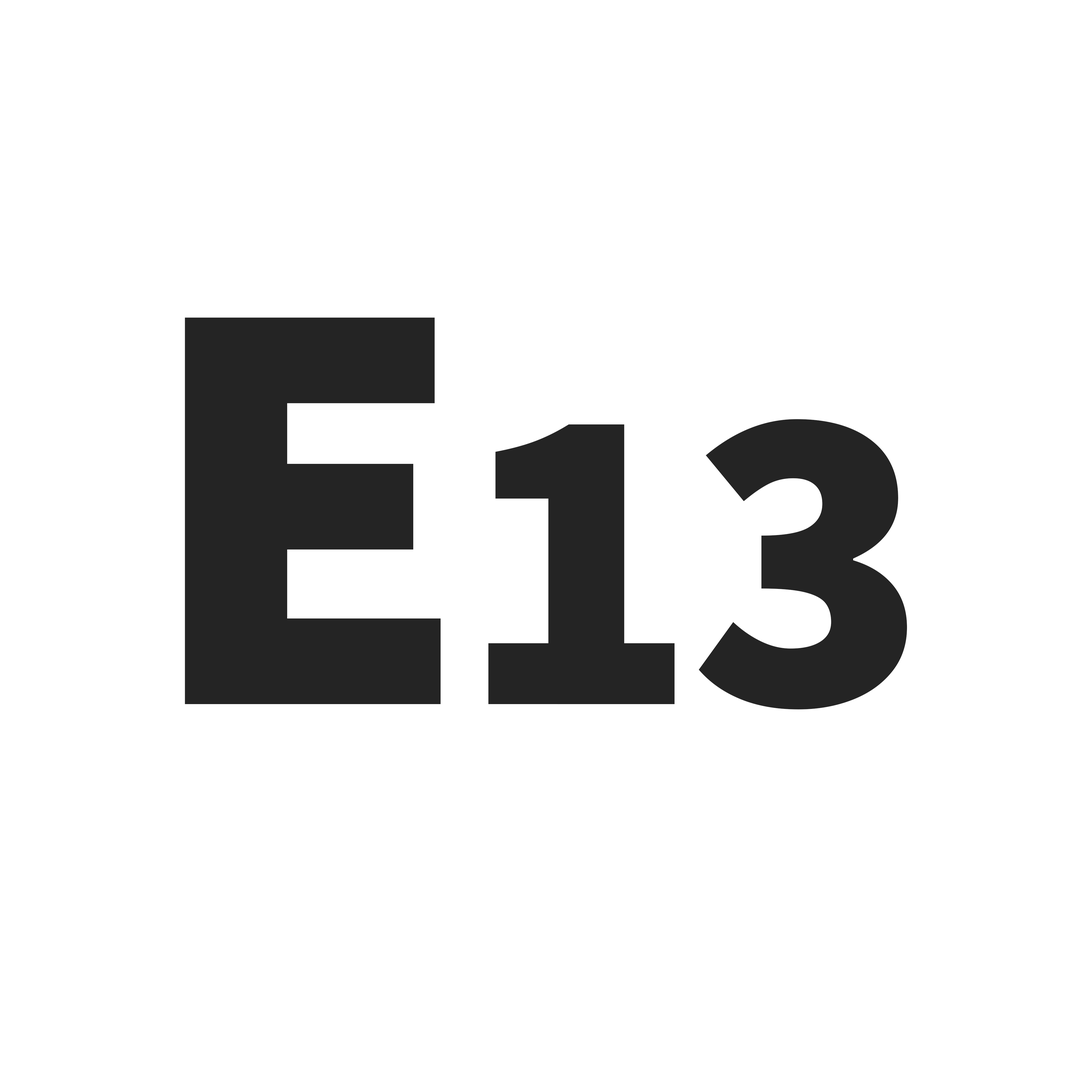
<style>
.page{position:relative;width:1092px;height:1092px;background:#ffffff}
.page>*{position:absolute;margin:0}
.t1{font:441.1px "Assistant-ExtraBold";color:#242424}
.t2{font:594.6px "Assistant-ExtraBold";color:#242424}
</style>
<div class="page">
<p class="t1" style="left:185px;top:318px;width:722px;height:391px"><span class="t2">E</span>13</p>
</div>
